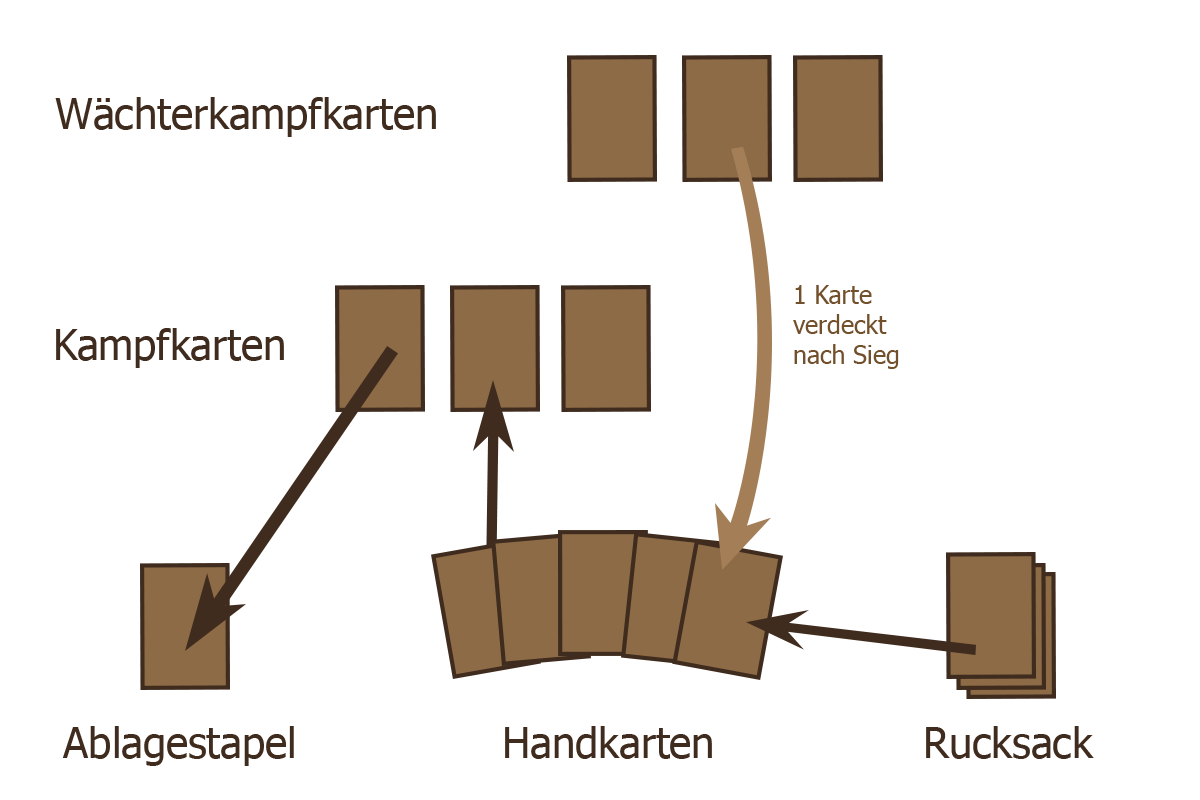
<style>
.page{position:relative;width:1200px;height:800px;background:#ffffff}
.page>*{position:absolute;margin:0}
.t1{font:41.7px "Tahoma";color:#3f2c1e}
.t2{font:25px "Tahoma";color:#73502c}
.t3{font:25px "Tahoma";color:#75542f}
</style>
<div class="page">
<p class="t1" style="left:55px;top:97px;width:381px;height:40px">Wächterkampfkarten</p>
<p class="t2" style="left:793px;top:285px;width:106px;height:84px"><span class="t3"> </span>1 Karte <br> verdeckt<br> nach Sieg</p>
<p class="t1" style="left:56px;top:328px;width:228px;height:40px">Kampfkarten</p>
<p class="t1" style="left:62px;top:726px;width:232px;height:40px">Ablagestapel</p>
<p class="t1" style="left:505px;top:726px;width:207px;height:33px">Handkarten</p>
<p class="t1" style="left:926px;top:726px;width:168px;height:33px">Rucksack</p>
</div>
